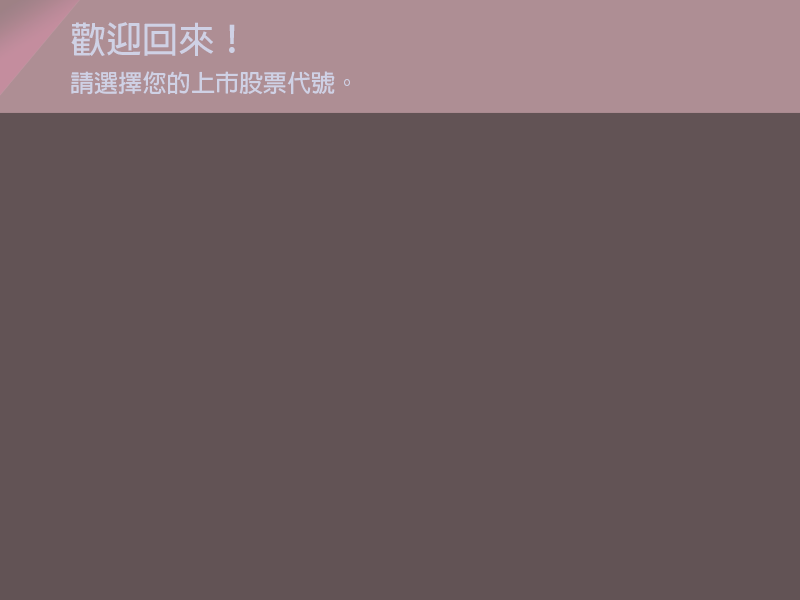
<style>
.page{position:relative;width:800px;height:600px;background:#625355}
.page>*{position:absolute;margin:0}
.t1{font:36.1px "AdobeFanHeitiStd-Bold";color:#cfd1e5}
.t2{font:24.1px "AdobeFanHeitiStd-Bold";color:#cfd1e5}
</style>
<div class="page">
<p class="t1" style="left:71px;top:22px;width:164px;height:34px">歡迎回來！</p>
<p class="t2" style="left:71px;top:71px;width:279px;height:24px">請選擇您的上市股票代號。</p>
</div>
